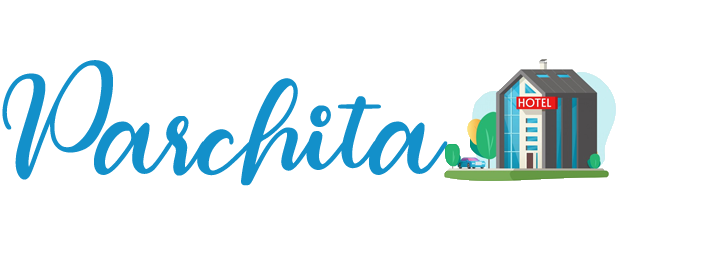
<style>
.page{position:relative;width:716px;height:256px;background:#ffffff}
.page>*{position:absolute;margin:0}
.t1{font:120px "Magelove";color:#1390ca}
</style>
<div class="page">
<p class="t1" style="left:2px;top:60px;width:446px;height:126px">Parchita</p>
</div>
